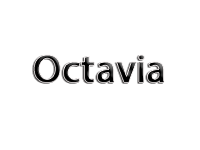
<style>
.page{position:relative;width:200px;height:150px;background:#ffffff}
.page>*{position:absolute;margin:0}
.t1{font:40px "MyriadPro-Regular";font-weight:bold}
</style>
<div class="page">
<p class="t1" style="left:34px;top:55px;width:130px;height:28px">Octavia</p>
</div>
